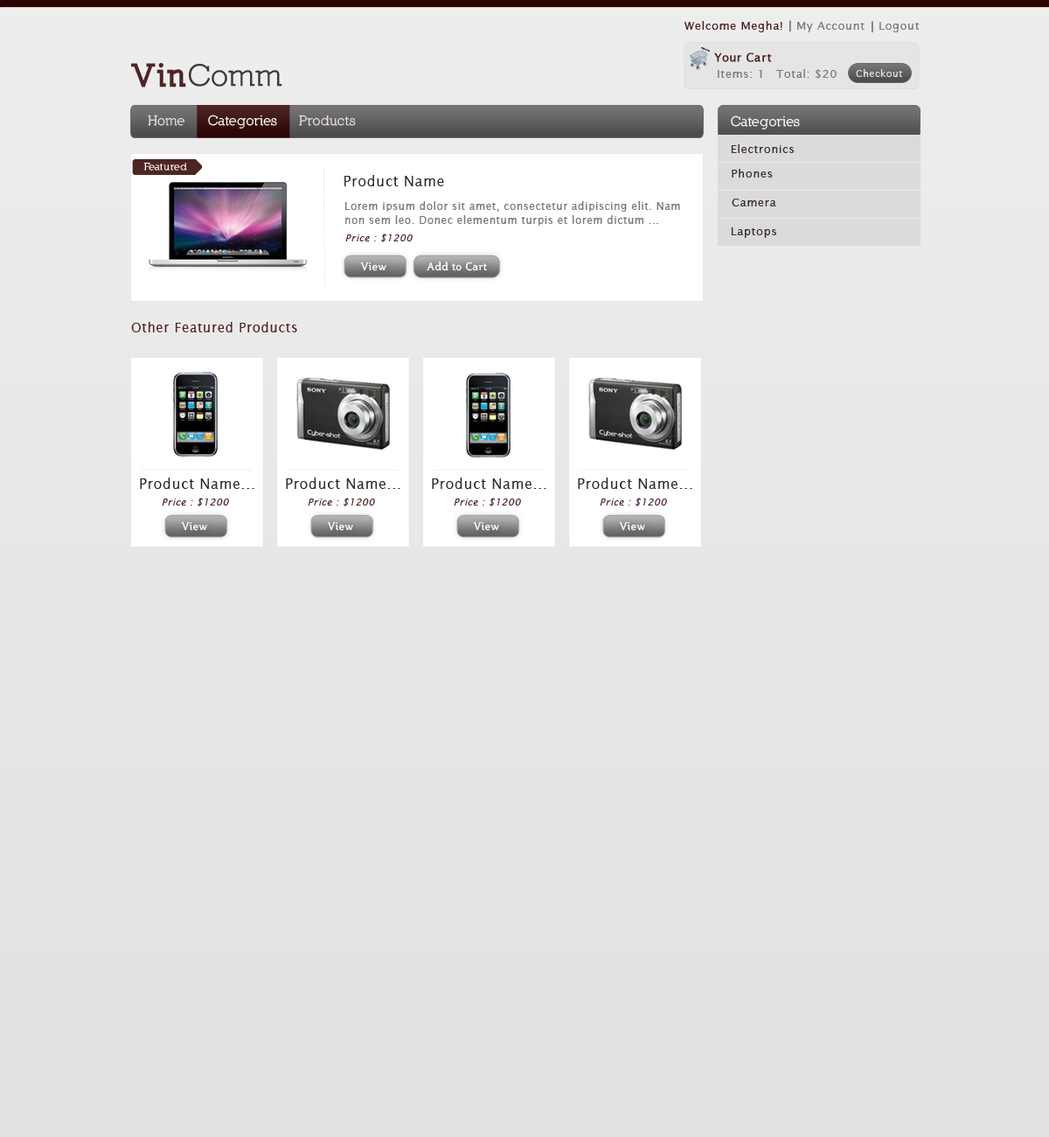
<style>
.page{position:relative;width:1049px;height:1137px}
.page>*{position:absolute;margin:0}
.t1{font:11.4px "LucidaSans";letter-spacing:0.04em;color:#4d2523}
.t2{font:11.4px "LucidaSans";letter-spacing:0.04em;color:#7b7979}
.t3{font:11.4px "LucidaSans";letter-spacing:0.03em;color:#4d2523;font-weight:bold}
.t4{font:31.5px "Nilland-Bold";letter-spacing:0.04em;color:#3c3939}
.t5{font:31.5px "Nilland-Black";letter-spacing:0.04em;color:#4d2523}
.t6{font:9.6px "LucidaSans";letter-spacing:0.04em;color:#e6e1e1}
.t7{font:14px "Nilland-Bold";letter-spacing:0.04em;color:#e6e1e1}
.t8{font:14px "Nilland-Bold";letter-spacing:0.04em;color:#ffffff}
.t9{font:11.4px "LucidaSans";letter-spacing:0.04em;color:#393434}
.t10{font:10.5px "Nilland";letter-spacing:0.03em;color:#ffffff;font-weight:bold}
.t11{font:14px "LucidaSans";letter-spacing:0.04em;color:#2c2525}
.t12{font:10.5px/14px "LucidaSans";letter-spacing:0.04em;color:#7b7979}
.t13{font:9.6px "LucidaSans-Italic";letter-spacing:0.04em;color:#4d2523}
.t14{font:11px "Steinem";letter-spacing:0.04em;color:#ffffff}
.t15{font:13.1px "LucidaSans";letter-spacing:0.04em;color:#4d2523}
</style>
<div class="page">
<p class="t1" style="left:685px;top:21px;width:97px;height:11px">Welcome Megha!</p>
<p class="t2" style="left:797px;top:22px;width:68px;height:10px">My Account</p>
<p class="t2" style="left:880px;top:22px;width:40px;height:10px">Logout</p>
<p class="t3" style="left:714px;top:52px;width:58px;height:10px">Your Cart</p>
<p class="t4" style="left:131px;top:63px;width:151px;height:24px"><span class="t5">Vin</span>Comm</p>
<p class="t2" style="left:718px;top:70px;width:44px;height:8px">Items: 1</p>
<p class="t2" style="left:776px;top:69px;width:61px;height:10px">Total: $20</p>
<p class="t6" style="left:856px;top:69px;width:47px;height:8px">Checkout</p>
<p class="t7" style="left:148px;top:115px;width:37px;height:11px">Home</p>
<p class="t8" style="left:208px;top:115px;width:69px;height:14px">Categories</p>
<p class="t7" style="left:299px;top:115px;width:57px;height:11px">Products</p>
<p class="t8" style="left:731px;top:115px;width:69px;height:14px">Categories</p>
<p class="t9" style="left:731px;top:144px;width:63px;height:9px">Electronics</p>
<p class="t10" style="left:143px;top:163px;width:44px;height:7px">Featured</p>
<p class="t9" style="left:732px;top:169px;width:41px;height:8px">Phones</p>
<p class="t11" style="left:344px;top:175px;width:100px;height:11px">Product Name</p>
<p class="t12" style="left:345px;top:201px;width:335px;height:25px">Lorem ipsum dolor sit amet, consectetur adipiscing elit. Nam non sem leo. Donec elementum turpis et lorem dictum ...</p>
<p class="t9" style="left:732px;top:198px;width:44px;height:8px">Camera</p>
<p class="t13" style="left:345px;top:233px;width:68px;height:9px">Price : $1200</p>
<p class="t9" style="left:731px;top:227px;width:45px;height:11px">Laptops</p>
<p class="t14" style="left:360px;top:261px;width:26px;height:10px">View</p>
<p class="t14" style="left:427px;top:261px;width:60px;height:10px">Add to Cart</p>
<p class="t15" style="left:131px;top:322px;width:166px;height:10px">Other Featured Products</p>
<p class="t11" style="left:140px;top:477px;width:114px;height:12px">Product Name...</p>
<p class="t11" style="left:286px;top:477px;width:114px;height:12px">Product Name...</p>
<p class="t11" style="left:432px;top:477px;width:114px;height:12px">Product Name...</p>
<p class="t11" style="left:578px;top:477px;width:114px;height:12px">Product Name...</p>
<p class="t13" style="left:162px;top:497px;width:67px;height:9px">Price : $1200</p>
<p class="t13" style="left:308px;top:497px;width:67px;height:9px">Price : $1200</p>
<p class="t13" style="left:454px;top:497px;width:67px;height:9px">Price : $1200</p>
<p class="t13" style="left:600px;top:497px;width:67px;height:9px">Price : $1200</p>
<p class="t14" style="left:181px;top:521px;width:26px;height:10px">View</p>
<p class="t14" style="left:327px;top:521px;width:26px;height:10px">View</p>
<p class="t14" style="left:473px;top:521px;width:26px;height:10px">View</p>
<p class="t14" style="left:619px;top:521px;width:26px;height:10px">View</p>
</div>
